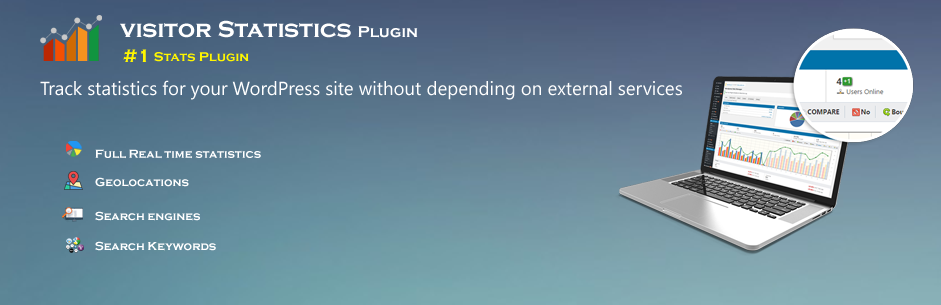
<style>
.page{position:relative;width:941px;height:305px}
.page>*{position:absolute;margin:0}
.t1{font:24px "CopperplateGothic-Bold";color:#ffffff}
.t2{font:16px "CopperplateGothic-Bold";color:#ffffff}
.t3{font:18.7px "CopperplateGothic-Bold";color:#fff600}
.t4{font:13.3px "CopperplateGothic-Bold";color:#fff600}
.t5{font:18.7px "Gadugi";color:#ffffff}
.t6{font:12px "CopperplateGothic-Bold";color:#ffffff}
</style>
<div class="page">
<p class="t1" style="left:120px;top:20px;width:298px;height:18px">visitor Statistics <span class="t2">Plugin</span></p>
<p class="t3" style="left:123px;top:49px;width:24px;height:13px">#1</p>
<p class="t4" style="left:154px;top:52px;width:95px;height:10px">Stats Plugin</p>
<p class="t5" style="left:40px;top:80px;width:642px;height:20px">Track statistics for your WordPress site without depending on external services</p>
<p class="t6" style="left:95px;top:149px;width:166px;height:10px">Full Real time statistics</p>
<p class="t6" style="left:95px;top:177px;width:94px;height:10px">Geolocations</p>
<p class="t6" style="left:95px;top:211px;width:105px;height:10px">Search engines</p>
<p class="t6" style="left:95px;top:241px;width:121px;height:10px">Search Keywords</p>
</div>
